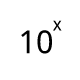
<style>
.page{position:relative;width:80px;height:80px;background:#ffffff}
.page>*{position:absolute;margin:0}
.t1{font:31.8px "DroidSans";color:#000000}
.t2{font:18px "DroidSans";color:#000000}
</style>
<div class="page">
<p class="t1" style="left:21px;top:30px;width:31px;height:24px">10</p>
<p class="t2" style="left:53px;top:20px;width:9px;height:11px">x</p>
</div>
